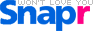
<style>
.page{position:relative;width:98px;height:31px;background:#ffffff}
.page>*{position:absolute;margin:0}
.t1{font:8px "FrucadeMedium";letter-spacing:0.005em;color:#c0c0c0;text-transform:uppercase}
</style>
<div class="page">
<p class="t1" style="left:18px;top:0px;width:75px;height:5px">won't  love  you</p>
</div>
